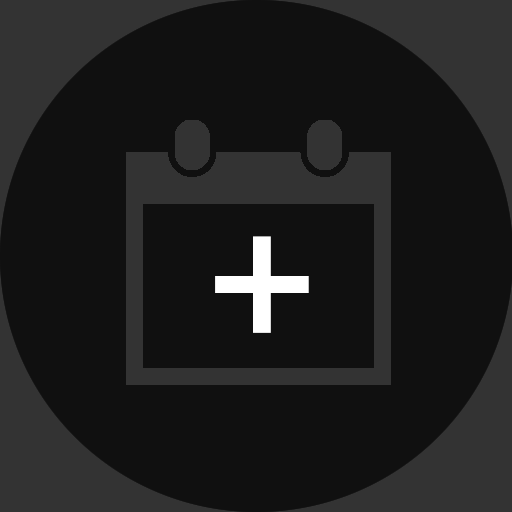
<style>
.page{position:relative;width:512px;height:512px;background:#101010}
.page>*{position:absolute;margin:0}
.t1{font:181px "MyriadPro-Bold";color:#ffffff}
</style>
<div class="page">
<p class="t1" style="left:215px;top:236px;width:94px;height:97px">+</p>
</div>
